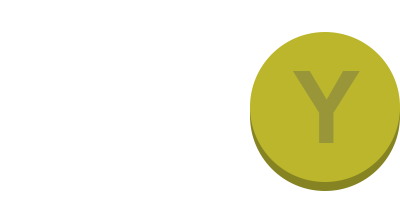
<style>
.page{position:relative;width:400px;height:200px;background:#ffffff}
.page>*{position:absolute;margin:0}
.t1{font:100px "Arial-BoldMT";color:#99963a}
</style>
<div class="page">
<p class="t1" style="left:293px;top:71px;width:67px;height:72px">Y</p>
</div>
